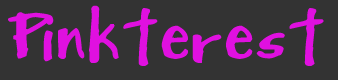
<style>
.page{position:relative;width:338px;height:80px;background:#333333}
.page>*{position:absolute;margin:0}
.t1{font:72px "MightytoSave";color:#e010e0}
</style>
<div class="page">
<p class="t1" style="left:8px;top:5px;width:316px;height:61px">Pinkterest</p>
</div>
